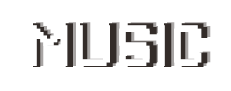
<style>
.page{position:relative;width:231px;height:91px;background:#ffffff}
.page>*{position:absolute;margin:0}
.t1{font:54.2px "PixelGameFont";letter-spacing:0.04em;color:#ffffff;text-transform:uppercase}
.t2{font:58.3px "PixelGameFont";text-transform:uppercase}
</style>
<div class="page">
<p class="t1" style="left:30px;top:25px;width:172px;height:41px">music</p>
<p class="t2" style="left:33px;top:23px;width:175px;height:44px">music</p>
<p class="t2" style="left:36px;top:22px;width:175px;height:44px">music</p>
</div>
